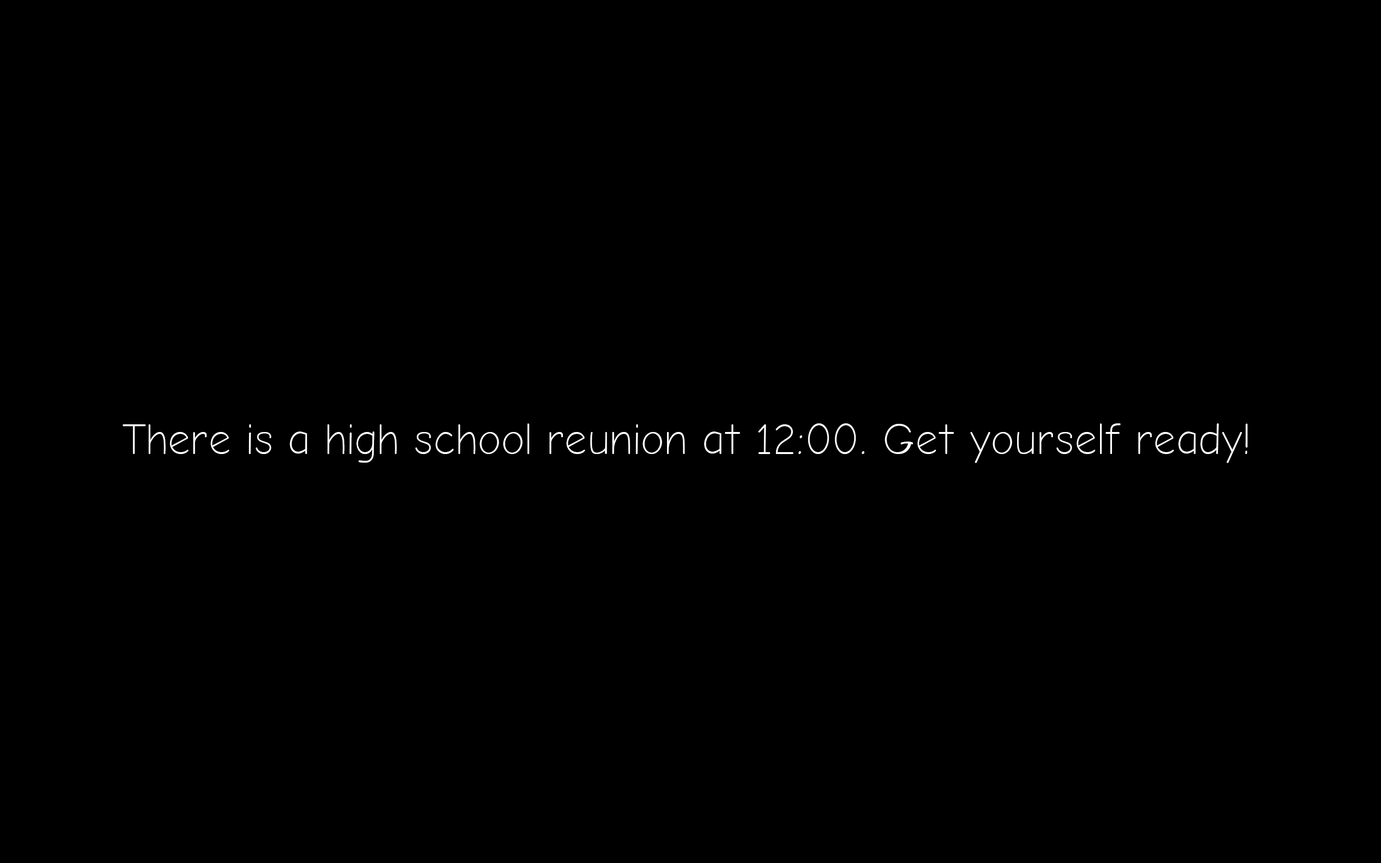
<style>
.page{position:relative;width:1381px;height:863px;background:#000000}
.page>*{position:absolute;margin:0}
.t1{font:44.1px "ComicNeue-Light";color:#ffffff}
</style>
<div class="page">
<p class="t1" style="left:123px;top:423px;width:1125px;height:40px">There is a high school reunion at 12:00. Get yourself ready!</p>
</div>
